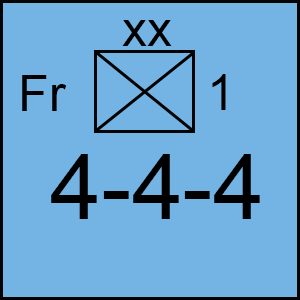
<style>
.page{position:relative;width:300px;height:300px;background:#74b4e4}
.page>*{position:absolute;margin:0}
.t1{font:50px "ArialMT";color:#000000}
.t2{font:91.7px "ArialMT";color:#000000}
</style>
<div class="page">
<p class="t1" style="left:122px;top:20px;width:50px;height:26px">xx</p>
<p class="t1" style="left:22px;top:75px;width:44px;height:36px">Fr</p>
<p class="t1" style="left:212px;top:74px;width:14px;height:36px">1</p>
<p class="t2" style="left:51px;top:154px;width:209px;height:65px">4-4-4</p>
</div>
